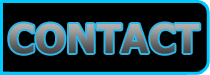
<style>
.page{position:relative;width:210px;height:75px;background:#000000}
.page>*{position:absolute;margin:0}
.t1{font:40px "Tahoma-Bold"}
</style>
<div class="page">
<p class="t1" style="left:9px;top:23px;width:191px;height:31px">CONTACT</p>
</div>
